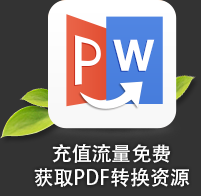
<style>
.page{position:relative;width:201px;height:196px;background:#333333}
.page>*{position:absolute;margin:0}
.t1{font:20px/24px "AdobeHeitiStd-Regular";color:#ffffff}
</style>
<div class="page">
<p class="t1" style="left:34px;top:144px;width:156px;height:43px">充值流量免费<br>获取PDF转换资源</p>
</div>
